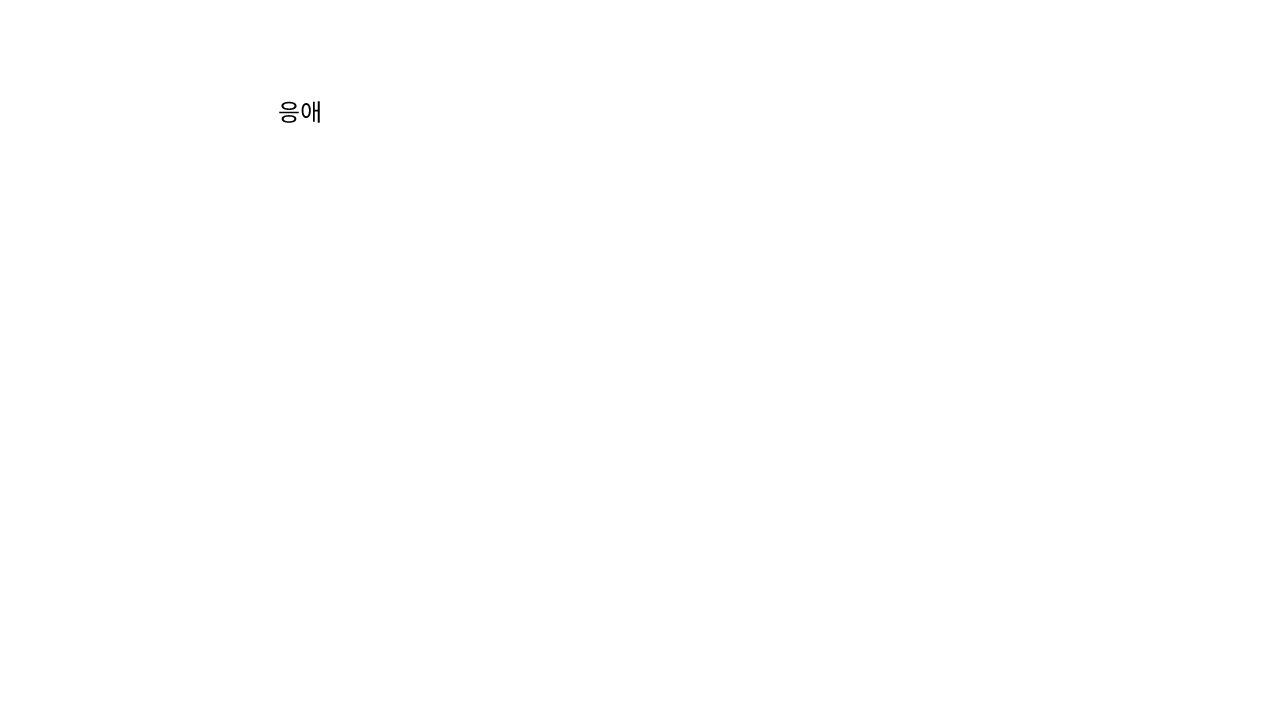
<style>
.page{position:relative;width:1280px;height:720px;background:#ffffff}
.page>*{position:absolute;margin:0}
.t1{font:24px "NotoSansKR-Regular";color:#000000}
</style>
<div class="page">
<p class="t1" style="left:279px;top:101px;width:41px;height:22px">응애</p>
</div>
